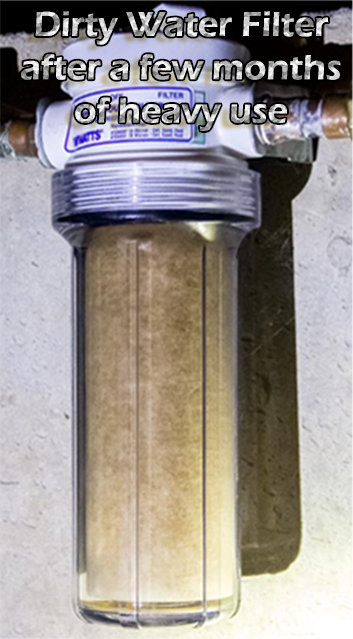
<style>
.page{position:relative;width:353px;height:639px}
.page>*{position:absolute;margin:0}
.t1{font:36px "ErasITC-Demi"}
</style>
<div class="page">
<p class="t1" style="left:21px;top:11px;width:320px;height:120px;text-align:center">Dirty Water Filter<br>after a few months<br>of heavy use</p>
</div>
